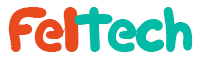
<style>
.page{position:relative;width:200px;height:70px;background:#ffffff}
.page>*{position:absolute;margin:0}
.t1{font:48px "TRENDY";color:#03baa7}
.t2{font:48px "TRENDY";color:#e8491d}
</style>
<div class="page">
<p class="t1" style="left:8px;top:7px;width:185px;height:45px"><span class="t2">fel</span>tech</p>
</div>
